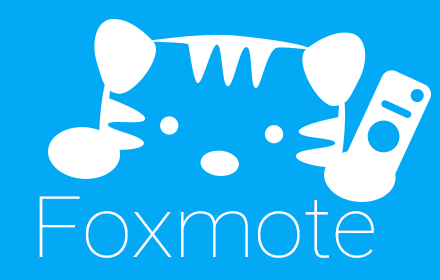
<style>
.page{position:relative;width:440px;height:280px;background:#03a9f4}
.page>*{position:absolute;margin:0}
.t1{font:85.1px "Roboto-Thin";color:#ffffff;scale:1.06 1}
</style>
<div class="page">
<p class="t1" style="left:39px;top:196px;width:335px;height:62px">Foxmote</p>
</div>
